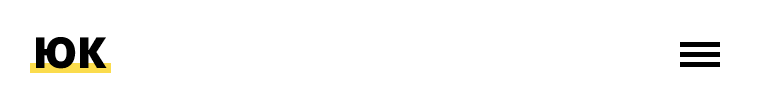
<style>
.page{position:relative;width:768px;height:109px;background:#ffffff}
.page>*{position:absolute;margin:0}
.t1{font:42px "Mplus1p-Black";color:#000000}
</style>
<div class="page">
<p class="t1" style="left:36px;top:37px;width:71px;height:32px">ЮК</p>
</div>
